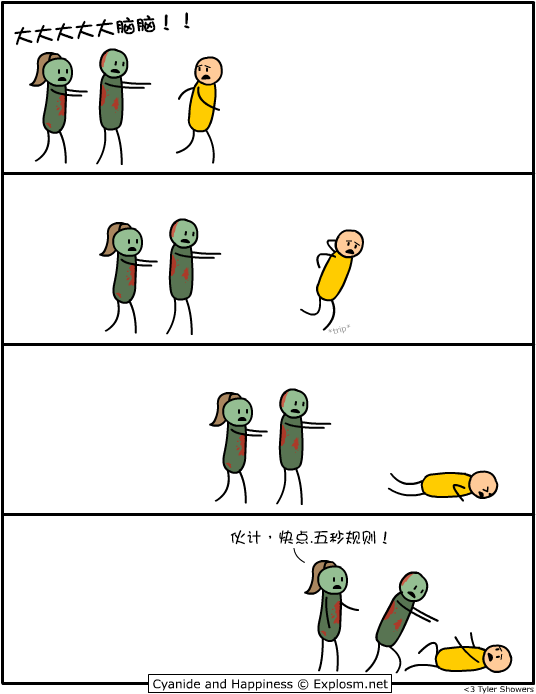
<style>
.page{position:relative;width:536px;height:694px;background:#ffffff}
.page>*{position:absolute;margin:0}
.t1{font:20px "DFGirl";color:#000000;font-weight:bold}
.t2{font:16px "DFGirl";color:#000000}
</style>
<div class="page">
<p class="t1" style="left:14px;top:12px;width:176px;height:34px;rotate:-6deg">大大大大大脑脑！！</p>
<p class="t2" style="left:230px;top:530px;width:157px;height:15px">伙计，快点.五秒规则！</p>
</div>
